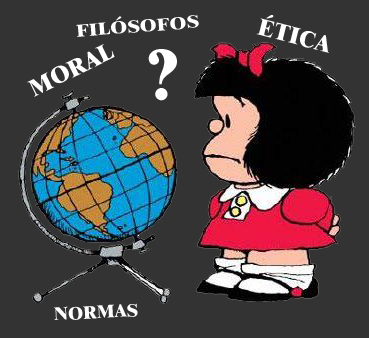
<style>
.page{position:relative;width:369px;height:338px;background:#333333}
.page>*{position:absolute;margin:0}
.t1{font:17.7px "Dutch801BT-ExtraBold";color:#ffffff;scale:1.16 1}
.t2{font:24px "Dutch801BT-ExtraBold";color:#ffffff}
.t3{font:72px "Dutch801BT-ExtraBold";color:#ffffff}
.t4{font:18.5px "Dutch801BT-ExtraBold";color:#ffffff}
</style>
<div class="page">
<p class="t1" style="left:76px;top:14px;width:123px;height:23px;rotate:-5deg">FILÓSOFOS</p>
<p class="t2" style="left:256px;top:15px;width:73px;height:38px;rotate:14deg">ÉTICA</p>
<p class="t2" style="left:27px;top:44px;width:88px;height:53px;rotate:-26deg">MORAL</p>
<p class="t3" style="left:148px;top:49px;width:29px;height:52px">?</p>
<p class="t4" style="left:53px;top:303px;width:85px;height:17px;rotate:-3deg">NORMAS</p>
</div>
